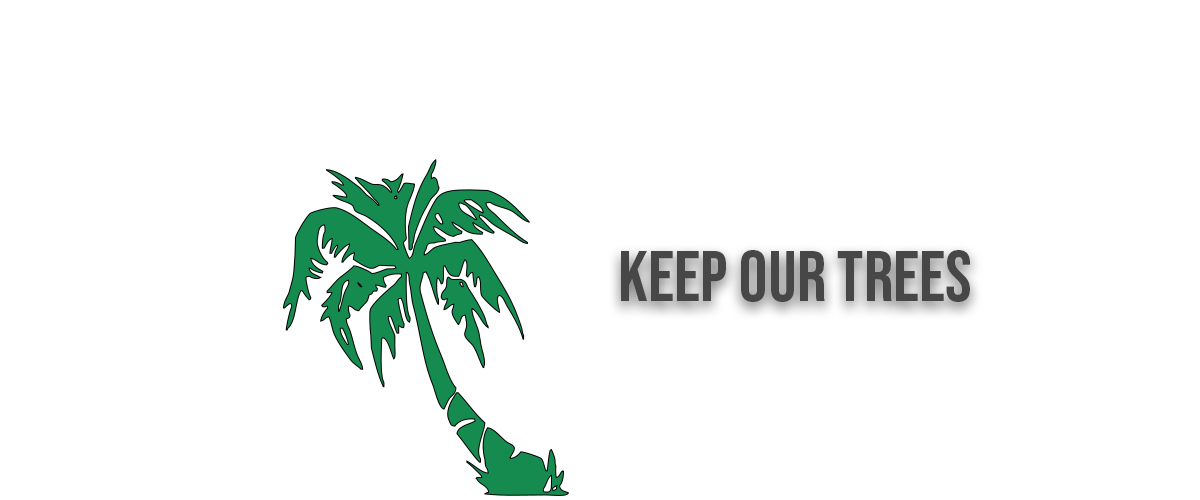
<style>
.page{position:relative;width:1200px;height:500px;background:#ffffff}
.page>*{position:absolute;margin:0}
.t1{font:72px "BebasNeue-Regular";color:#474747}
</style>
<div class="page">
<p class="t1" style="left:621px;top:250px;width:349px;height:52px">Keep Our Trees</p>
</div>
